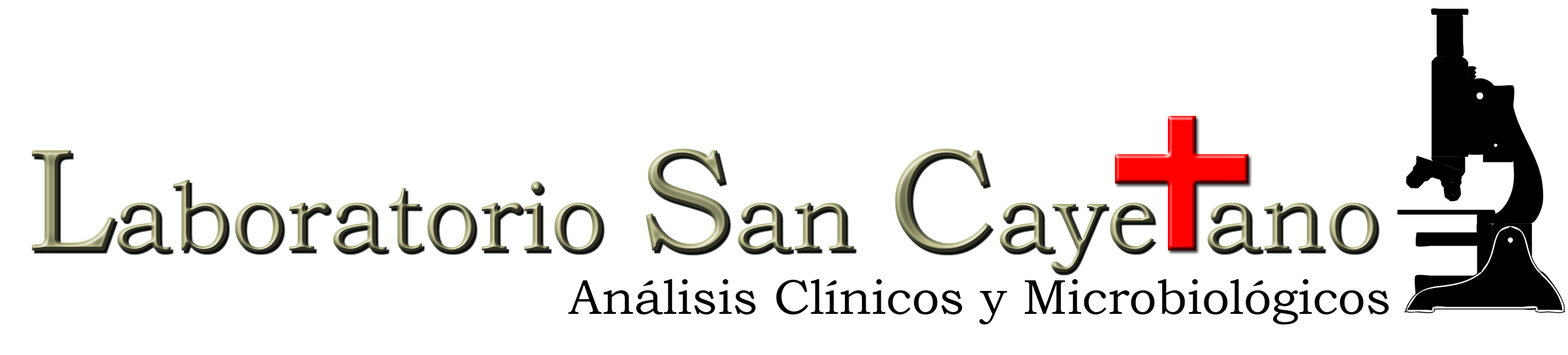
<style>
.page{position:relative;width:1568px;height:355px;background:#ffffff}
.page>*{position:absolute;margin:0}
.t1{font:98.1px "BookmanOldStyle"}
.t2{font:147.1px "BookmanOldStyle"}
.t3{font:49px "BookmanOldStyle";color:#000000}
</style>
<div class="page">
<p class="t1" style="left:32px;top:148px;width:1122px;height:124px"><span class="t2">L</span>aboratorio <span class="t2">S</span>an <span class="t2">C</span>aye</p>
<p class="t1" style="left:1207px;top:203px;width:170px;height:49px">ano</p>
<p class="t3" style="left:568px;top:279px;width:821px;height:46px">Análisis Clínicos y Microbiológicos</p>
</div>
